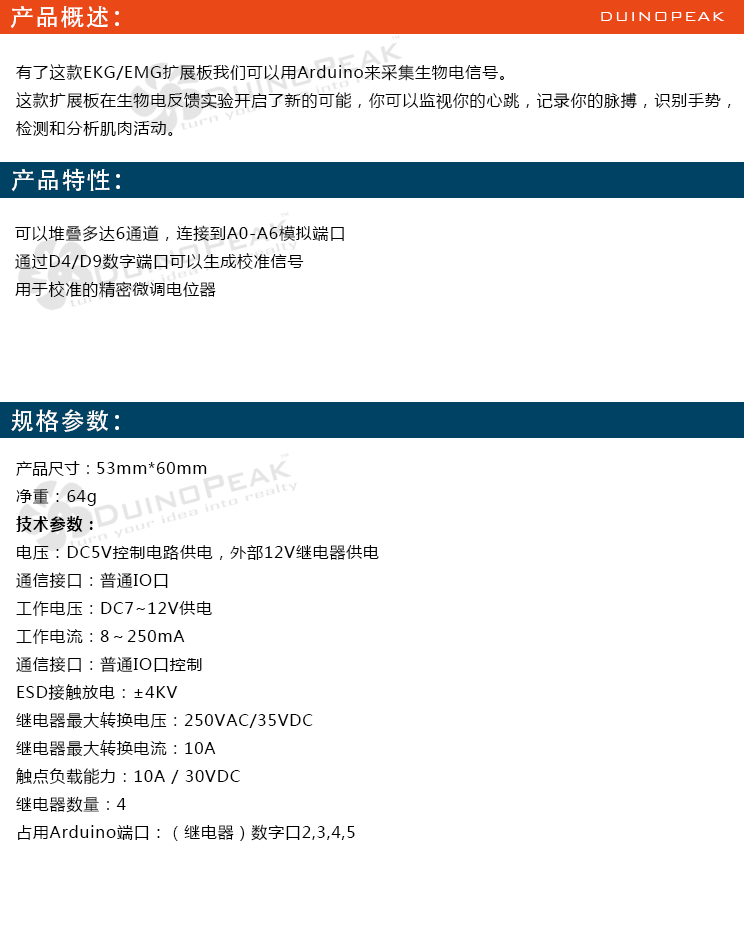
<style>
.page{position:relative;width:744px;height:934px;background:#ffffff}
.page>*{position:absolute;margin:0}
.t1{font:24px "AdobeHeitiStd-Regular";letter-spacing:0.05em;color:#ffffff}
.t2{font:18px "BankGothicBT-Light";letter-spacing:0.05em;color:#ffffff}
.t3{font:16px "MicrosoftYaHei";letter-spacing:0.05em;color:#000000}
.t4{font:16px "MicrosoftYaHei";color:#000000}
.t5{font:16px "MicrosoftYaHei-Bold";letter-spacing:0.05em;color:#000000}
</style>
<div class="page">
<p class="t1" style="left:10px;top:6px;width:109px;height:23px">产品概述：</p>
<p class="t2" style="left:601px;top:12px;width:124px;height:9px">DUINOPEAK</p>
<p class="t3" style="left:16px;top:64px;width:715px;height:72px">有了这款EKG/EMG扩展板我们可以用Arduino来采集生物电信号。<br>这款扩展板在生物电反馈实验开启了新的可能，你可以监视你的心跳，记录你的脉搏，识别手势，<br>检测和分析肌肉活动。</p>
<p class="t1" style="left:11px;top:168px;width:109px;height:24px">产品特性：</p>
<p class="t3" style="left:15px;top:225px;width:329px;height:73px">可以堆叠多达6通道，连接到A0-A6模拟端口<br>通过D4/D9数字端口可以生成校准信号<br>用于校准的精密微调电位器</p>
<p class="t1" style="left:11px;top:409px;width:108px;height:23px">规格参数：</p>
<p class="t3" style="left:16px;top:461px;width:363px;height:380px"><span class="t4">产品尺寸：</span>53mm*60mm<br>净重：64g<br><span class="t5">技术参数：<br></span>电压：DC5V控制电路供电，外部12V继电器供电<br>通信接口：普通IO口<br>工作电压：DC7~12V供电<br>工作电流：8～250mA<br>通信接口：普通IO口控制<br>ESD接触放电：±4KV<br>继电器最大转换电压：250VAC/35VDC<br>继电器最大转换电流：10A<br>触点负载能力：10A / 30VDC<br>继电器数量：4<br>占用Arduino端口：（继电器）数字口2,3,4,5</p>
</div>
